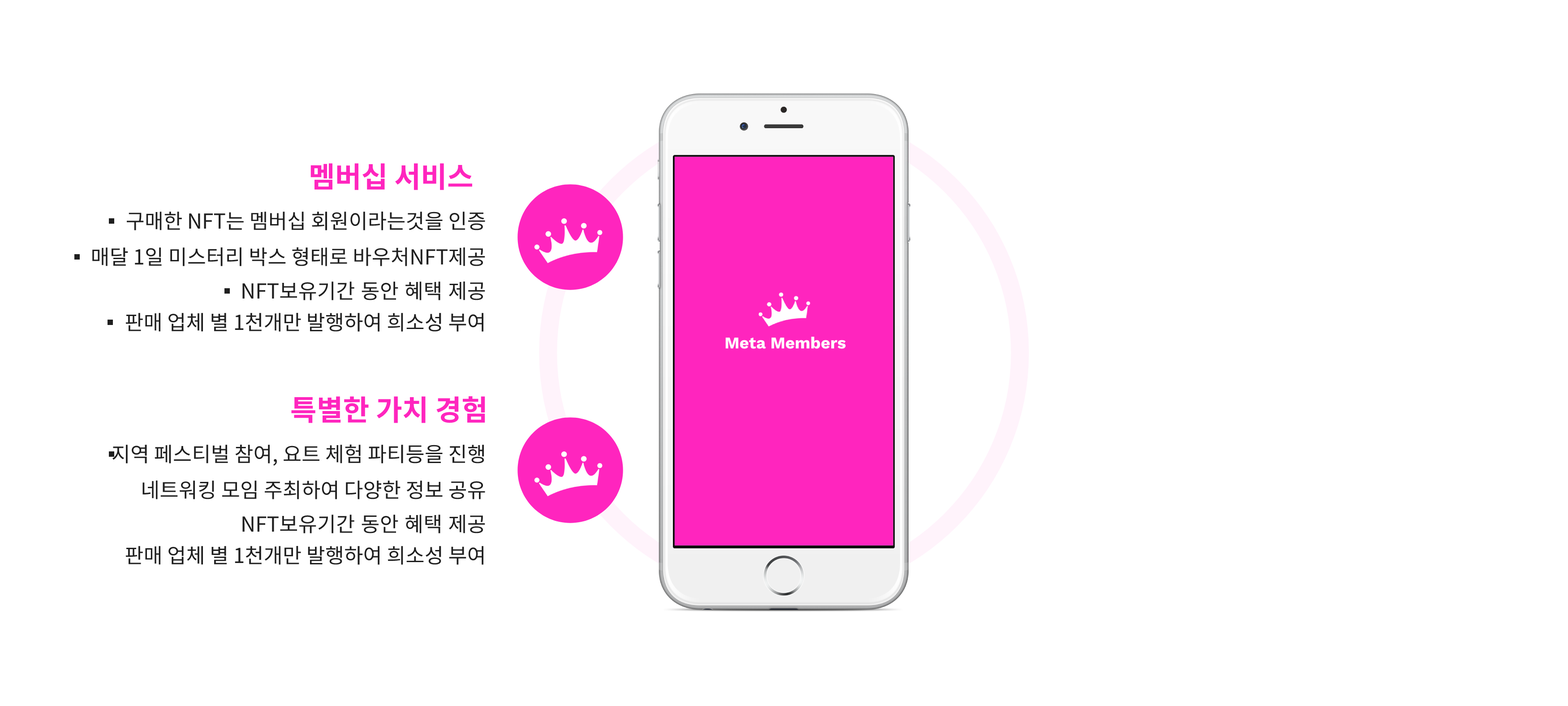
<style>
.page{position:relative;width:1568px;height:706px;background:#ffffff}
.page>*{position:absolute;margin:0}
.t1{font:28.7px "NotoSansKR-Bold";color:#ff25be}
.t2{font:20.6px "NotoSansKR-Regular";color:#1f1f1f}
</style>
<div class="page">
<p class="t1" style="left:310px;top:163px;width:163px;height:27px">멤버십 서비스</p>
<p class="t2" style="left:126px;top:211px;width:359px;height:19px">구매한 NFT는 멤버십 회원이라는것을 인증</p>
<p class="t2" style="left:92px;top:247px;width:393px;height:19px">매달 1일 미스터리 박스 형태로 바우처NFT제공</p>
<p class="t2" style="left:242px;top:281px;width:243px;height:19px">NFT보유기간 동안 혜택 제공</p>
<p class="t2" style="left:125px;top:313px;width:359px;height:19px">판매 업체 별 1천개만 발행하여 희소성 부여</p>
<p class="t1" style="left:291px;top:396px;width:194px;height:27px">특별한 가치 경험</p>
<p class="t2" style="left:112px;top:444px;width:372px;height:21px">지역 페스티벌 참여, 요트 체험 파티등을 진행</p>
<p class="t2" style="left:142px;top:480px;width:343px;height:19px">네트워킹 모임 주최하여 다양한 정보 공유</p>
<p class="t2" style="left:242px;top:514px;width:243px;height:19px">NFT보유기간 동안 혜택 제공</p>
<p class="t2" style="left:125px;top:546px;width:359px;height:18px">판매 업체 별 1천개만 발행하여 희소성 부여</p>
</div>
